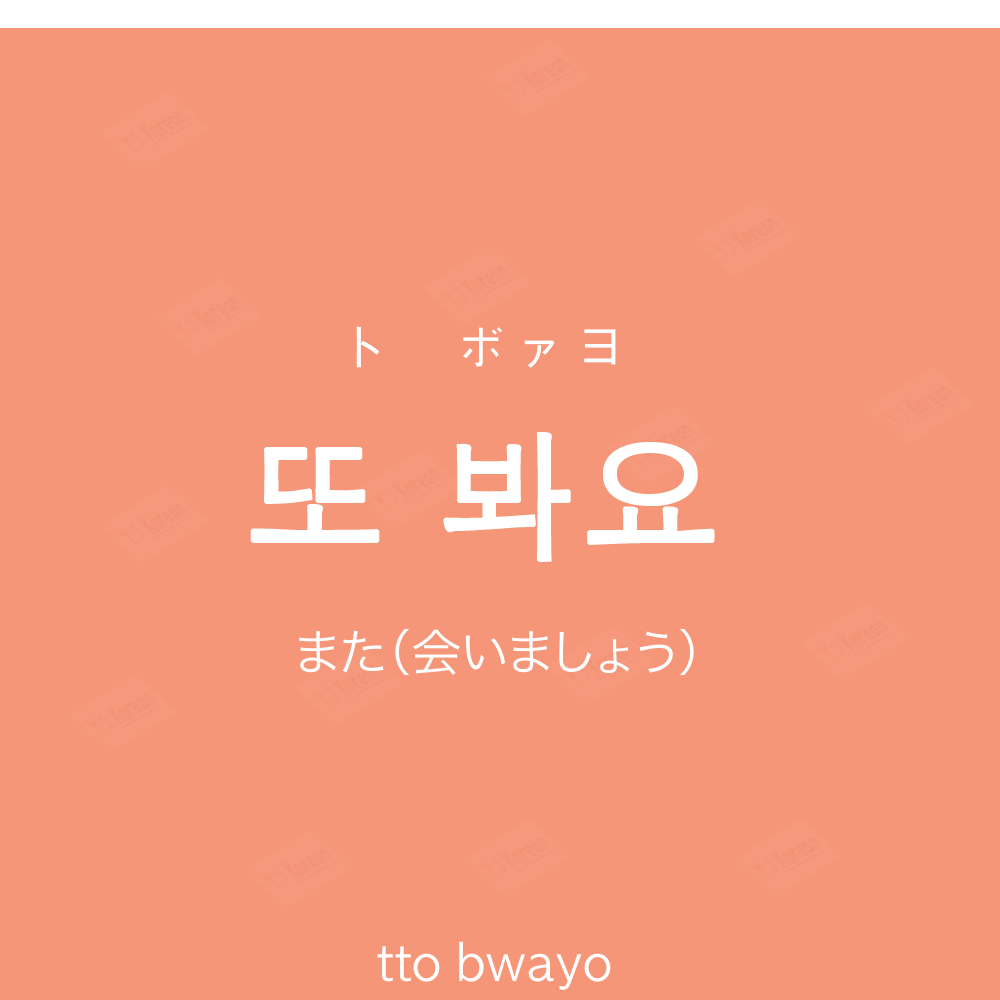
<style>
.page{position:relative;width:1000px;height:1000px;background:#f69679}
.page>*{position:absolute;margin:0}
.t1{font:60px "AppleGothic";color:#ffffff}
.t2{font:140px "AppleGothic";color:#ffffff;font-weight:bold}
.t3{font:50px "HiraKakuProN-W3";color:#ffffff}
.t4{font:50px "AppleGothic";color:#ffffff}
</style>
<div class="page">
<p class="t1" style="left:356px;top:326px;width:260px;height:42px">ト　ボァヨ</p>
<p class="t2" style="left:250px;top:432px;width:465px;height:130px">또 봐요</p>
<p class="t3" style="left:299px;top:628px;width:395px;height:48px">また（会いましょう）</p>
<p class="t4" style="left:377px;top:941px;width:234px;height:49px">tto bwayo</p>
</div>
